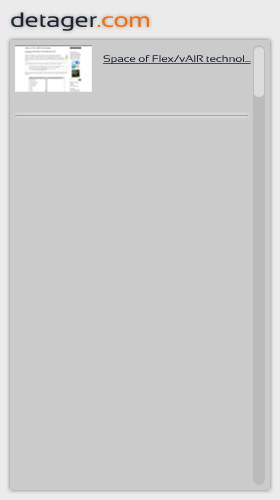
<style>
.page{position:relative;width:280px;height:500px;background:#cbcbcb}
.page>*{position:absolute;margin:0}
.t1{font:20.8px "Sansation";letter-spacing:-0.02em;color:#1c232e;scale:1.25 1}
.t2{font:20.8px "Sansation";letter-spacing:-0.02em;color:#ff6a00;scale:1.25 1}
.t3{font:9.6px "Sansation";letter-spacing:-0.02em;color:#1c232e;text-decoration:underline;scale:1.25 1}
</style>
<div class="page">
<p class="t1" style="left:11px;top:12px;width:138px;height:19px">detager<span class="t2">.com</span></p>
<p class="t3" style="left:103px;top:55px;width:148px;height:9px">Space of Flex/vAIR technol...</p>
</div>
